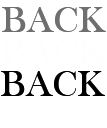
<style>
.page{position:relative;width:107px;height:128px;background:#ffffff}
.page>*{position:absolute;margin:0}
.t1{font:38px "BaskOldFace";color:#706f70}
.t2{font:38px "BaskOldFace";color:#000000}
</style>
<div class="page">
<p class="t1" style="left:2px;top:7px;width:104px;height:25px">BACK</p>
<p class="t2" style="left:1px;top:71px;width:104px;height:25px">BACK</p>
</div>
